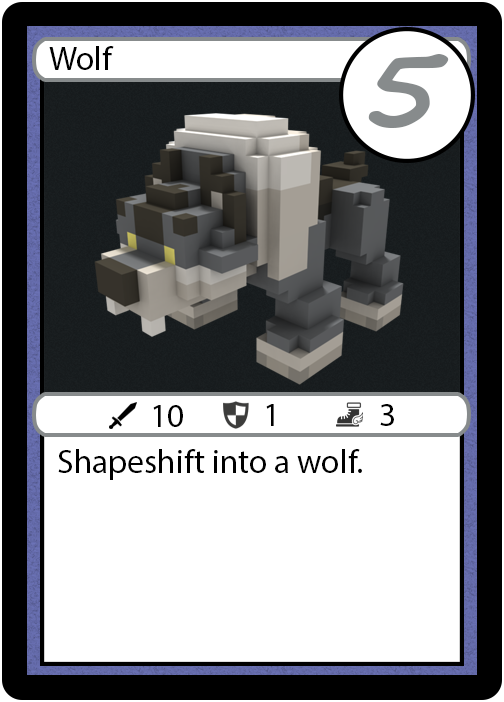
<style>
.page{position:relative;width:504px;height:702px;background:#ffffff}
.page>*{position:absolute;margin:0}
.t1{font:33.3px "MyriadPro-Regular";color:#000000}
.t2{font:111px "SegoeScript-Bold";color:#878b8c}
</style>
<div class="page">
<p class="t1" style="left:49px;top:46px;width:65px;height:24px">Wolf</p>
<p class="t2" style="left:368px;top:54px;width:81px;height:74px">5</p>
<p class="t1" style="left:153px;top:405px;width:30px;height:22px">10</p>
<p class="t1" style="left:266px;top:404px;width:8px;height:22px">1</p>
<p class="t1" style="left:380px;top:404px;width:14px;height:22px">3</p>
<p class="t1" style="left:58px;top:449px;width:304px;height:31px">Shapeshift into a wolf.</p>
</div>
